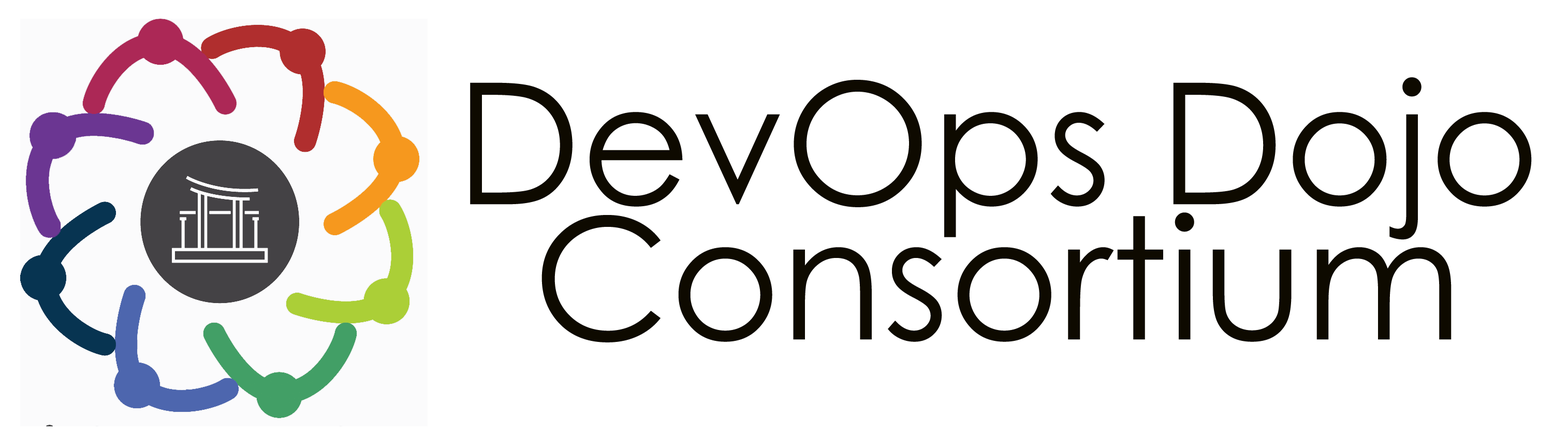
<style>
.page{position:relative;width:1568px;height:445px;background:#ffffff}
.page>*{position:absolute;margin:0}
.t1{font:168.9px/135.1px "CenturyGothic";color:#0e0a00}
</style>
<div class="page">
<p class="t1" style="left:470px;top:77px;width:1062px;height:265px;text-align:center">DevOps Dojo<br>Consortium</p>
</div>
